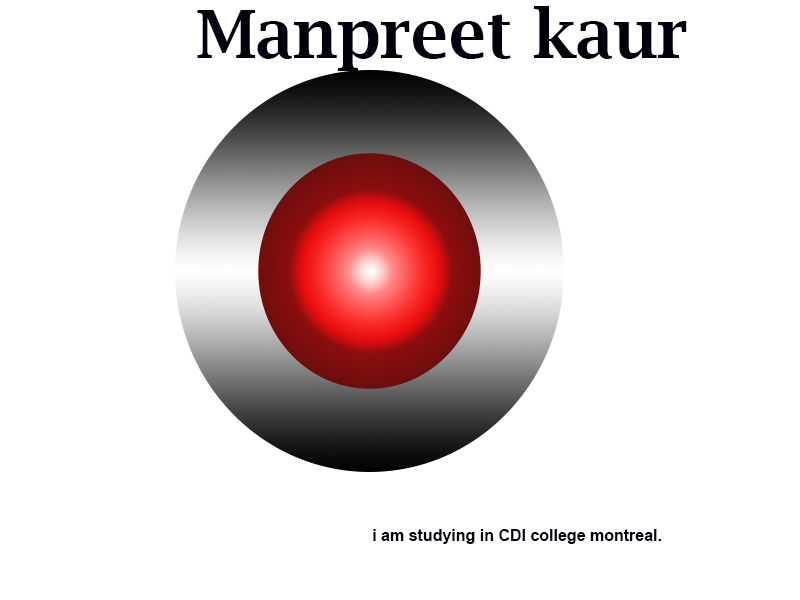
<style>
.page{position:relative;width:800px;height:600px;background:#ffffff}
.page>*{position:absolute;margin:0}
.t1{font:66.7px "LucidaBright-Demi";color:#02010d}
.t2{font:16px "Arial-BoldMT";color:#02010d}
</style>
<div class="page">
<p class="t1" style="left:197px;top:6px;width:490px;height:65px">Manpreet kaur</p>
<p class="t2" style="left:373px;top:529px;width:288px;height:15px">i am studying in CDI college montreal.</p>
</div>
